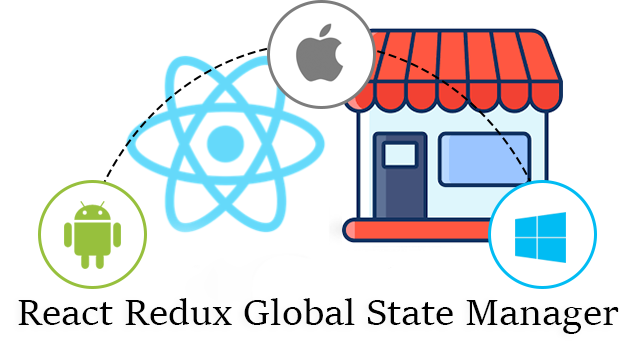
<style>
.page{position:relative;width:636px;height:349px;background:#ffffff}
.page>*{position:absolute;margin:0}
.t1{font:40px "SitkaSubheading";color:#000000}
</style>
<div class="page">
<p class="t1" style="left:18px;top:298px;width:601px;height:36px">React Redux Global State Manager</p>
</div>
